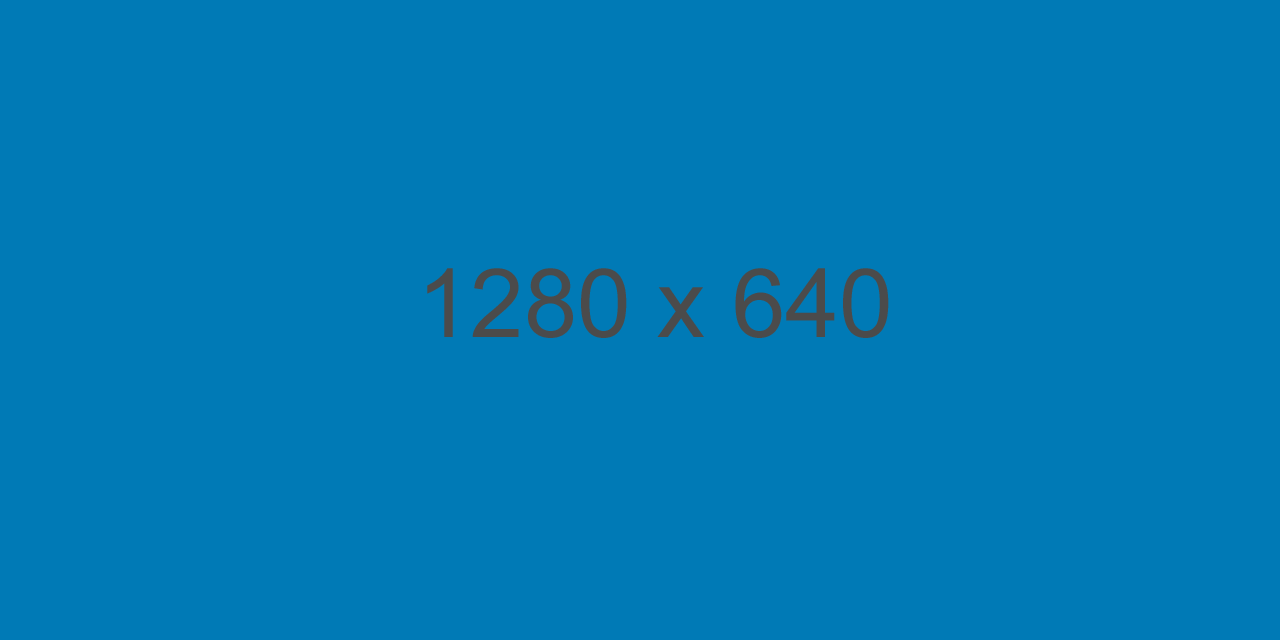
<style>
.page{position:relative;width:1280px;height:640px;background:#007ab6}
.page>*{position:absolute;margin:0}
.t1{font:96px "ArialMT";color:#4b4b4b}
</style>
<div class="page">
<p class="t1" style="left:427px;top:268px;width:462px;height:70px">1280 x 640</p>
</div>
